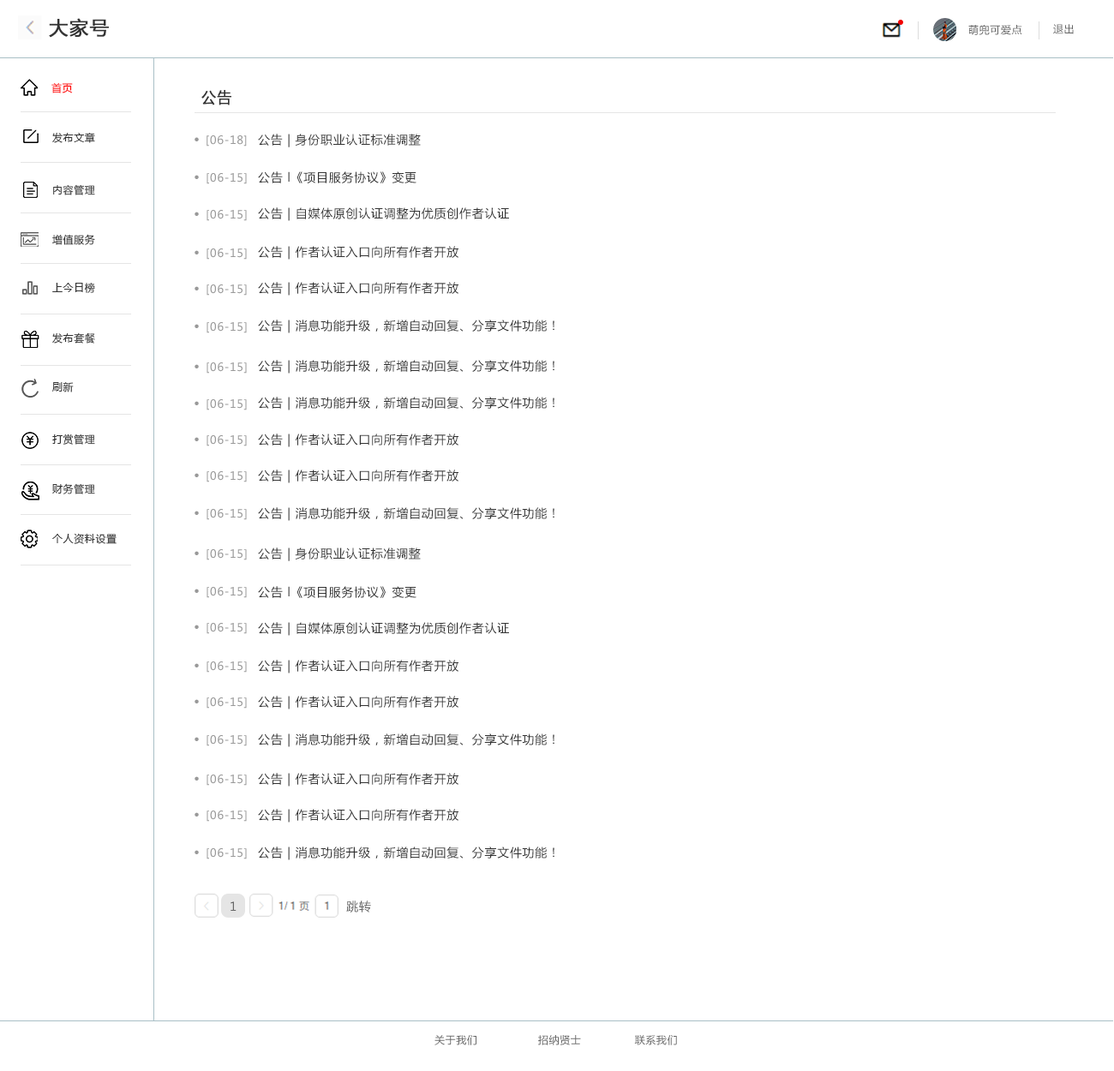
<style>
.page{position:relative;width:1114px;height:1071px;background:#ffffff}
.page>*{position:absolute;margin:0}
.t1{font:18.8px "MicrosoftYaHei";letter-spacing:0.05em;color:#333333;font-weight:bold}
.t2{font:10.3px "MicrosoftYaHei";letter-spacing:0.05em;color:#666666}
.t3{font:10.3px "MicrosoftYaHei";letter-spacing:0.05em;color:#ff0000}
.t4{font:15.4px "MicrosoftYaHei";letter-spacing:0.05em;color:#333333;font-weight:bold;scale:0.93 1}
.t5{font:10.3px "MicrosoftYaHei";letter-spacing:0.05em;color:#333333}
.t6{font:11.1px "MicrosoftYaHei";letter-spacing:0.05em;color:#999999}
.t7{font:13.7px "MicrosoftYaHei-Bold";letter-spacing:0.05em;color:#999999}
.t8{font:12px "MicrosoftYaHei";letter-spacing:0.05em;color:#333333}
.t9{font:12px "MicrosoftYaHei";letter-spacing:0.05em;color:#666666}
</style>
<div class="page">
<p class="t1" style="left:49px;top:18px;width:60px;height:20px">大家号</p>
<p class="t2" style="left:968px;top:25px;width:54px;height:10px">萌兜可爱点</p>
<p class="t2" style="left:1053px;top:24px;width:20px;height:10px">退出</p>
<p class="t3" style="left:51px;top:82px;width:22px;height:11px">首页</p>
<p class="t4" style="left:201px;top:90px;width:30px;height:15px">公告</p>
<p class="t5" style="left:52px;top:132px;width:43px;height:11px">发布文章</p>
<p class="t6" style="left:194px;top:135px;width:53px;height:11px"><span class="t7">· </span>[06-18]</p>
<p class="t8" style="left:258px;top:134px;width:163px;height:13px">公告 | 身份职业认证标准调整</p>
<p class="t6" style="left:194px;top:173px;width:53px;height:11px"><span class="t7">· </span>[06-15]</p>
<p class="t8" style="left:258px;top:171px;width:158px;height:12px">公告 l《项目服务协议》变更</p>
<p class="t5" style="left:53px;top:184px;width:42px;height:11px">内容管理</p>
<p class="t6" style="left:194px;top:210px;width:53px;height:11px"><span class="t7">· </span>[06-15]</p>
<p class="t8" style="left:258px;top:207px;width:251px;height:14px">公告 | 自媒体原创认证调整为优质创作者认证</p>
<p class="t5" style="left:52px;top:234px;width:43px;height:11px">增值服务</p>
<p class="t8" style="left:258px;top:246px;width:200px;height:14px">公告 | 作者认证入口向所有作者开放</p>
<p class="t6" style="left:194px;top:248px;width:53px;height:12px"><span class="t7">· </span>[06-15]</p>
<p class="t5" style="left:52px;top:282px;width:43px;height:11px">上今日榜</p>
<p class="t8" style="left:258px;top:282px;width:200px;height:14px">公告 | 作者认证入口向所有作者开放</p>
<p class="t6" style="left:194px;top:284px;width:53px;height:12px"><span class="t7">· </span>[06-15]</p>
<p class="t6" style="left:194px;top:322px;width:53px;height:11px"><span class="t7">· </span>[06-15]</p>
<p class="t8" style="left:258px;top:320px;width:296px;height:13px">公告 | 消息功能升级，新增自动回复、分享文件功能！</p>
<p class="t5" style="left:52px;top:332px;width:43px;height:12px">发布套餐</p>
<p class="t6" style="left:194px;top:362px;width:53px;height:11px"><span class="t7">· </span>[06-15]</p>
<p class="t8" style="left:258px;top:360px;width:296px;height:13px">公告 | 消息功能升级，新增自动回复、分享文件功能！</p>
<p class="t5" style="left:52px;top:382px;width:22px;height:10px">刷新</p>
<p class="t6" style="left:194px;top:399px;width:53px;height:11px"><span class="t7">· </span>[06-15]</p>
<p class="t8" style="left:258px;top:397px;width:296px;height:13px">公告 | 消息功能升级，新增自动回复、分享文件功能！</p>
<p class="t5" style="left:52px;top:433px;width:43px;height:12px">打赏管理</p>
<p class="t6" style="left:194px;top:435px;width:53px;height:11px"><span class="t7">· </span>[06-15]</p>
<p class="t8" style="left:258px;top:433px;width:200px;height:14px">公告 | 作者认证入口向所有作者开放</p>
<p class="t6" style="left:194px;top:471px;width:53px;height:11px"><span class="t7">· </span>[06-15]</p>
<p class="t8" style="left:258px;top:469px;width:200px;height:14px">公告 | 作者认证入口向所有作者开放</p>
<p class="t5" style="left:52px;top:483px;width:43px;height:11px">财务管理</p>
<p class="t6" style="left:194px;top:509px;width:53px;height:11px"><span class="t7">· </span>[06-15]</p>
<p class="t8" style="left:258px;top:507px;width:296px;height:14px">公告 | 消息功能升级，新增自动回复、分享文件功能！</p>
<p class="t5" style="left:52px;top:533px;width:65px;height:11px">个人资料设置</p>
<p class="t6" style="left:194px;top:549px;width:53px;height:11px"><span class="t7">· </span>[06-15]</p>
<p class="t8" style="left:258px;top:547px;width:163px;height:14px">公告 | 身份职业认证标准调整</p>
<p class="t6" style="left:194px;top:587px;width:53px;height:11px"><span class="t7">· </span>[06-15]</p>
<p class="t8" style="left:258px;top:586px;width:158px;height:12px">公告 l《项目服务协议》变更</p>
<p class="t6" style="left:194px;top:623px;width:53px;height:11px"><span class="t7">· </span>[06-15]</p>
<p class="t8" style="left:258px;top:622px;width:251px;height:14px">公告 | 自媒体原创认证调整为优质创作者认证</p>
<p class="t6" style="left:194px;top:661px;width:53px;height:11px"><span class="t7">· </span>[06-15]</p>
<p class="t8" style="left:258px;top:660px;width:200px;height:13px">公告 | 作者认证入口向所有作者开放</p>
<p class="t6" style="left:194px;top:697px;width:53px;height:11px"><span class="t7">· </span>[06-15]</p>
<p class="t8" style="left:258px;top:696px;width:200px;height:13px">公告 | 作者认证入口向所有作者开放</p>
<p class="t6" style="left:194px;top:735px;width:53px;height:11px"><span class="t7">· </span>[06-15]</p>
<p class="t8" style="left:258px;top:733px;width:296px;height:14px">公告 | 消息功能升级，新增自动回复、分享文件功能！</p>
<p class="t8" style="left:258px;top:773px;width:200px;height:13px">公告 | 作者认证入口向所有作者开放</p>
<p class="t6" style="left:194px;top:774px;width:53px;height:12px"><span class="t7">· </span>[06-15]</p>
<p class="t8" style="left:258px;top:809px;width:200px;height:13px">公告 | 作者认证入口向所有作者开放</p>
<p class="t6" style="left:194px;top:810px;width:53px;height:12px"><span class="t7">· </span>[06-15]</p>
<p class="t6" style="left:194px;top:848px;width:53px;height:11px"><span class="t7">· </span>[06-15]</p>
<p class="t8" style="left:258px;top:846px;width:296px;height:14px">公告 | 消息功能升级，新增自动回复、分享文件功能！</p>
<p class="t9" style="left:230px;top:901px;width:6px;height:10px">1</p>
<p class="t9" style="left:346px;top:900px;width:25px;height:12px">跳转</p>
<p class="t2" style="left:434px;top:1035px;width:243px;height:10px">关于我们                 招纳贤士               联系我们</p>
</div>
